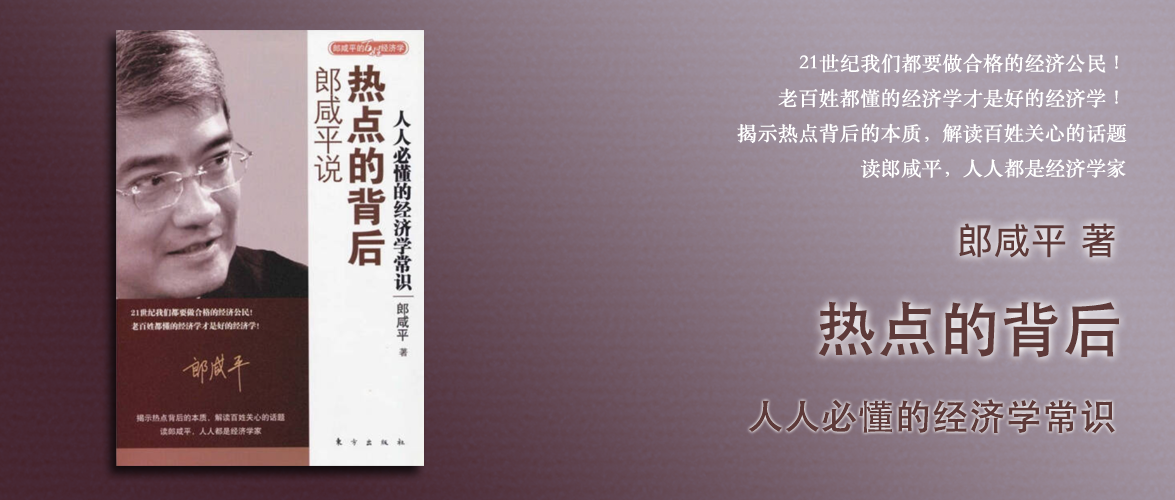
<style>
.page{position:relative;width:1175px;height:500px}
.page>*{position:absolute;margin:0}
.t1{font:20px "STSongti-SC-Regular";color:#ffffff;font-weight:bold}
.t2{font:36px "PingFangSC-Regular";color:#5e3939;font-weight:bold}
.t3{font:60px "STHeiti";color:#5e3a39;font-weight:bold}
.t4{font:36px "AdobeHeitiStd-Regular";color:#5e3a39;font-weight:bold}
</style>
<div class="page">
<p class="t1" style="left:737px;top:53px;width:390px;height:125px;text-align:right">21世纪我们都要做合格的经济公民！<br>老百姓都懂的经济学才是好的经济学！<br>揭示热点背后的本质，解读百姓关心的话题<br>读郎咸平，人人都是经济学家</p>
<p class="t2" style="left:959px;top:223px;width:156px;height:35px">郎咸平 著</p>
<p class="t3" style="left:819px;top:301px;width:300px;height:57px">热点的背后</p>
<p class="t4" style="left:749px;top:399px;width:366px;height:35px">人人必懂的经济学常识</p>
</div>
